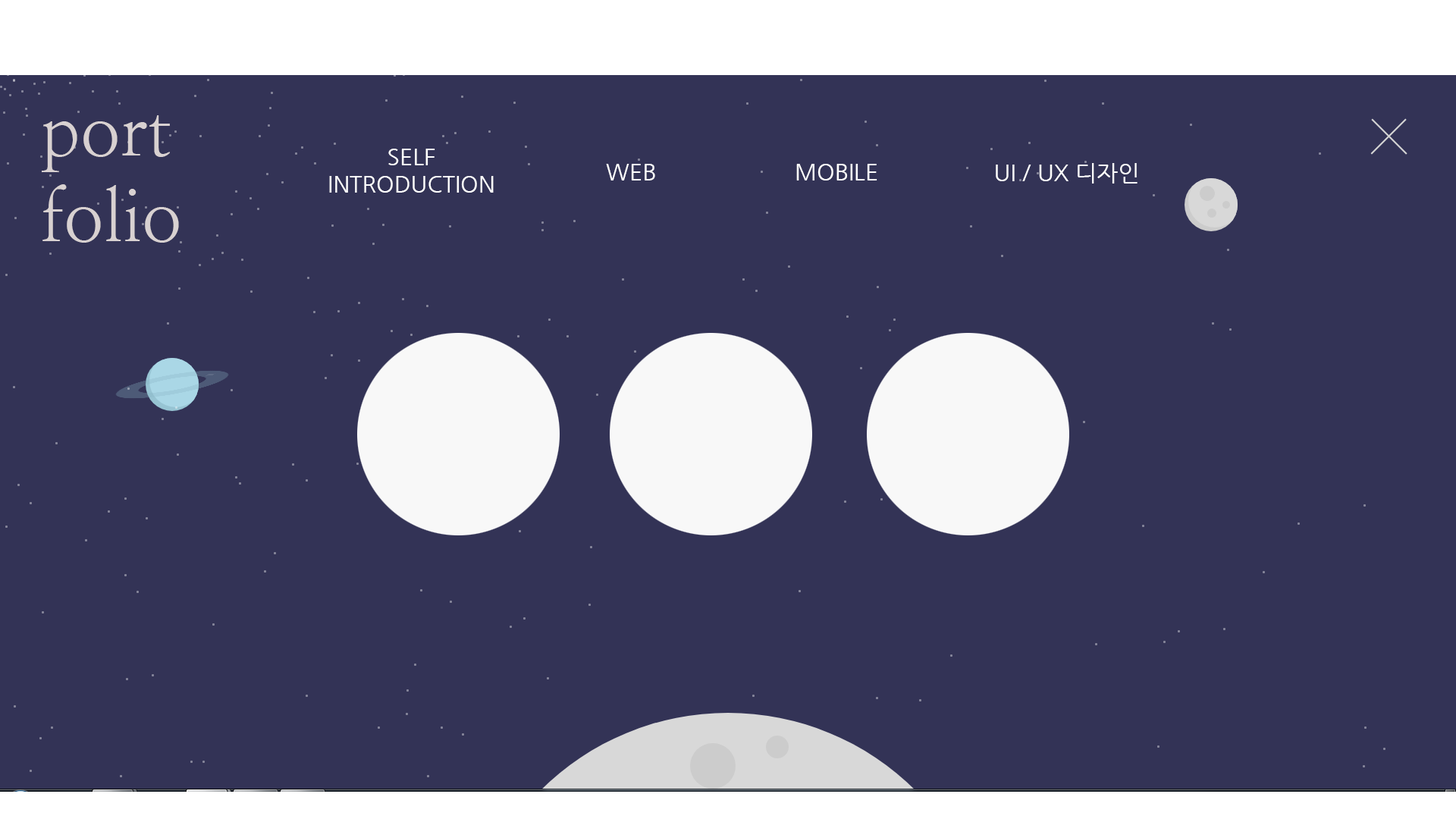
<style>
.page{position:relative;width:1456px;height:819px;background:#333356}
.page>*{position:absolute;margin:0}
.t1{font:71.3px "NanumMyeongjo";color:#d8d1d1}
.t2{font:22.7px "NanumGothic";color:#ffffff}
</style>
<div class="page">
<p class="t1" style="left:42px;top:115px;width:137px;height:128px">port<br>folio</p>
<p class="t2" style="left:329px;top:149px;width:165px;height:44px;text-align:center">SELF<br>INTRODUCTION</p>
<p class="t2" style="left:606px;top:164px;width:49px;height:16px">WEB</p>
<p class="t2" style="left:796px;top:164px;width:81px;height:16px">MOBILE</p>
<p class="t2" style="left:996px;top:163px;width:141px;height:21px">UI / UX 디자인</p>
</div>
